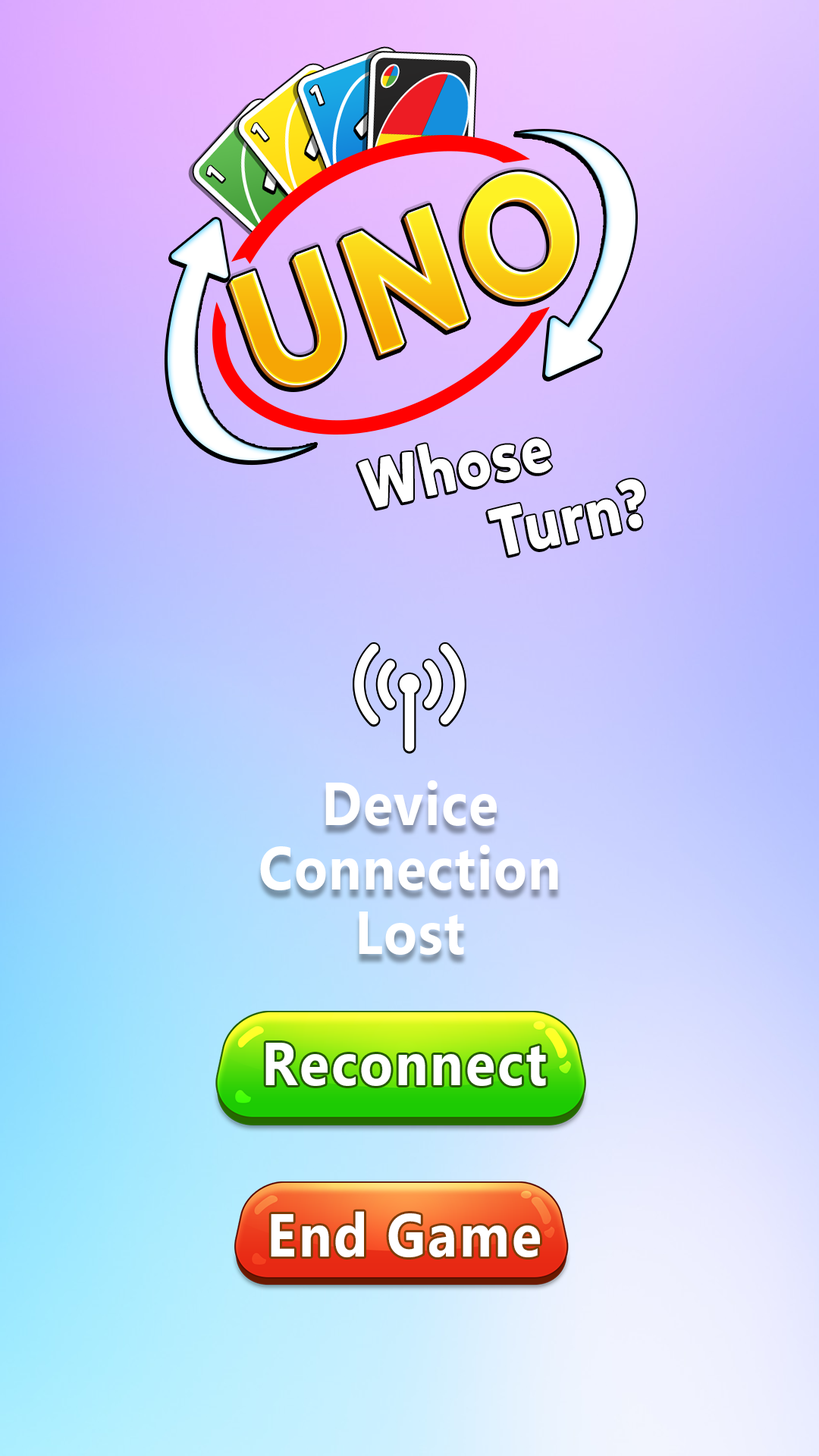
<style>
.page{position:relative;width:819px;height:1456px}
.page>*{position:absolute;margin:0}
.t1{font:60.7px/64.5px "Ebrima-Bold";letter-spacing:0.02em;color:#ffffff;scale:0.9 1}
.t2{font:60.6px "Ebrima-Bold";letter-spacing:0.04em;color:#ffffff;scale:0.9 1}
</style>
<div class="page">
<p class="t1" style="left:260px;top:780px;width:298px;height:175px;text-align:center">Device<br>Connection<br>Lost</p>
<p class="t2" style="left:265px;top:1043px;width:281px;height:43px">Reconnect</p>
<p class="t2" style="left:271px;top:1211px;width:269px;height:46px">End Game</p>
</div>
